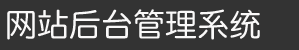
<style>
.page{position:relative;width:299px;height:50px;background:#333333}
.page>*{position:absolute;margin:0}
.t1{font:32px "QingYuanMono";color:#faf9f9}
</style>
<div class="page">
<p class="t1" style="left:7px;top:9px;width:253px;height:31px">网站后台管理系统</p>
</div>
